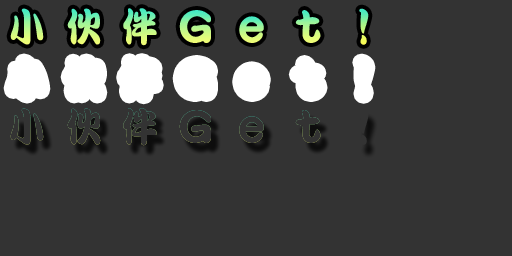
<style>
.page{position:relative;width:512px;height:256px;background:#333333}
.page>*{position:absolute;margin:0}
.t1{font:40px "DFPKanTingLiuW9";scale:0.9 1}
.t2{font:48px "DFPKanTingLiuW9"}
.t3{font:48px "DFPKanTingLiuW9";scale:0.9 1}
.t4{font:40px "DFPKanTingLiuW9";color:#333333;scale:0.9 1}
.t5{font:48px "DFPKanTingLiuW9";color:#333333}
.t6{font:48px "DFPKanTingLiuW9";color:#333333;scale:0.9 1}
</style>
<div class="page">
<p class="t1" style="left:10px;top:8px;width:34px;height:37px">小</p>
<p class="t1" style="left:67px;top:8px;width:34px;height:37px">伙</p>
<p class="t1" style="left:123px;top:8px;width:34px;height:38px">伴</p>
<p class="t2" style="left:179px;top:10px;width:32px;height:33px">G</p>
<p class="t3" style="left:239px;top:16px;width:25px;height:27px">e</p>
<p class="t3" style="left:295px;top:10px;width:26px;height:33px">t</p>
<p class="t4" style="left:10px;top:108px;width:34px;height:37px">小</p>
<p class="t4" style="left:67px;top:108px;width:34px;height:37px">伙</p>
<p class="t4" style="left:123px;top:108px;width:34px;height:38px">伴</p>
<p class="t5" style="left:179px;top:110px;width:32px;height:33px">G</p>
<p class="t6" style="left:295px;top:110px;width:26px;height:33px">t</p>
<p class="t6" style="left:239px;top:116px;width:25px;height:27px">e</p>
</div>
